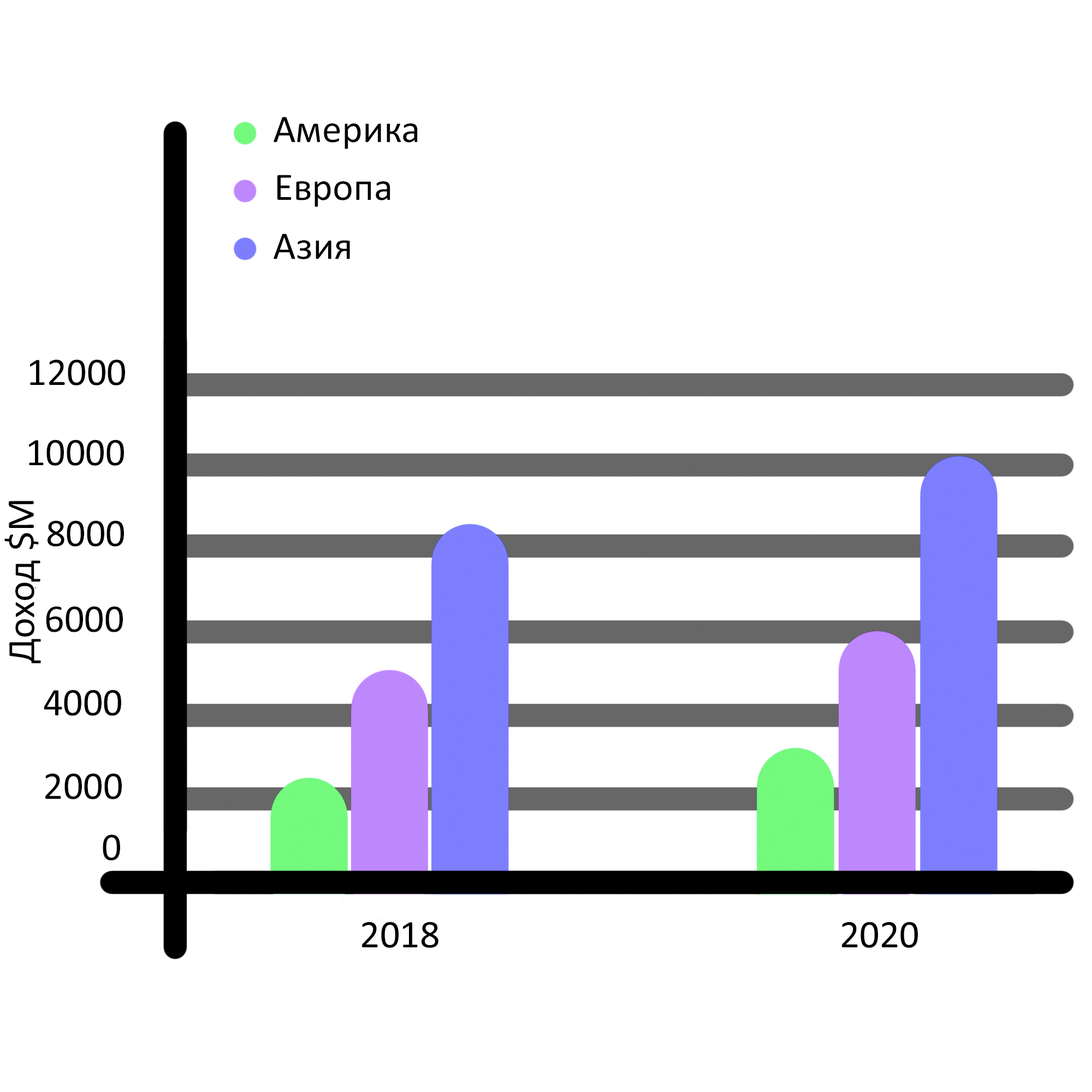
<style>
.page{position:relative;width:1092px;height:1092px;background:#ffffff}
.page>*{position:absolute;margin:0}
.t1{font:39.3px "Calibri";color:#000000}
</style>
<div class="page">
<p class="t1" style="left:274px;top:117px;width:144px;height:32px">Америка</p>
<p class="t1" style="left:277px;top:175px;width:113px;height:32px">Европа</p>
<p class="t1" style="left:274px;top:234px;width:76px;height:25px">Азия</p>
<p class="t1" style="left:30px;top:359px;width:95px;height:26px">12000</p>
<p class="t1" style="left:29px;top:440px;width:95px;height:26px">10000</p>
<p class="t1" style="left:4px;top:501px;width:37px;height:162px;rotate:-90deg">Доход $M</p>
<p class="t1" style="left:48px;top:520px;width:76px;height:27px">8000</p>
<p class="t1" style="left:46px;top:606px;width:77px;height:26px">6000</p>
<p class="t1" style="left:44px;top:690px;width:77px;height:26px">4000</p>
<p class="t1" style="left:45px;top:773px;width:77px;height:26px">2000</p>
<p class="t1" style="left:103px;top:834px;width:17px;height:26px">0</p>
</div>
